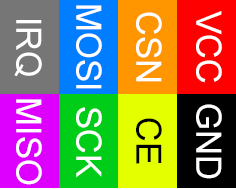
<style>
.page{position:relative;width:236px;height:189px}
.page>*{position:absolute;margin:0}
.t1{font:34.7px "ArialMT";color:#ffffff}
.t2{font:34.7px "ArialMT";color:#000000}
</style>
<div class="page">
<p class="t1" style="left:76px;top:5px;width:26px;height:84px;rotate:90deg">MOSI</p>
<p class="t1" style="left:136px;top:12px;width:26px;height:70px;rotate:90deg">CSN</p>
<p class="t1" style="left:196px;top:11px;width:26px;height:72px;rotate:90deg">VCC</p>
<p class="t1" style="left:14px;top:20px;width:28px;height:57px;rotate:90deg">IRQ</p>
<p class="t1" style="left:16px;top:99px;width:26px;height:86px;rotate:90deg">MISO</p>
<p class="t1" style="left:76px;top:107px;width:26px;height:71px;rotate:90deg">SCK</p>
<p class="t1" style="left:196px;top:104px;width:26px;height:75px;rotate:90deg">GND</p>
<p class="t2" style="left:136px;top:118px;width:26px;height:46px;rotate:90deg">CE</p>
</div>
